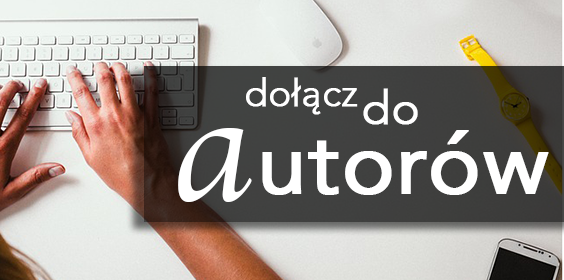
<style>
.page{position:relative;width:564px;height:280px}
.page>*{position:absolute;margin:0}
.t1{font:37.6px "Avenir-Light";color:#ffffff;font-weight:bold}
.t2{font:47px "Avenir-Light";color:#ffffff;font-weight:bold}
.t3{font:156.8px "Apple-Chancery";color:#ffffff}
.t4{font:88.1px "Avenir-Roman";color:#ffffff;font-weight:bold}
</style>
<div class="page">
<p class="t1" style="left:246px;top:77px;width:112px;height:38px">dołącz</p>
<p class="t2" style="left:363px;top:88px;width:55px;height:37px">do</p>
<p class="t3" style="left:178px;top:128px;width:74px;height:74px">a</p>
<p class="t4" style="left:262px;top:130px;width:287px;height:65px">utorów</p>
</div>
